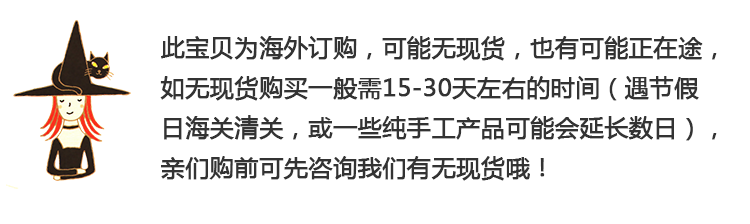
<style>
.page{position:relative;width:750px;height:224px;background:#ffffff}
.page>*{position:absolute;margin:0}
.t1{font:24px/40px "MicrosoftYaHei";color:#333333;font-weight:bold}
</style>
<div class="page">
<p class="t1" style="left:160px;top:36px;width:557px;height:145px">此宝贝为海外订购，可能无现货，也有可能正在途，<br>如无现货购买一般需15-30天左右的时间（遇节假<br>日海关清关，或一些纯手工产品可能会延长数日），<br>亲们购前可先咨询我们有无现货哦！</p>
</div>
